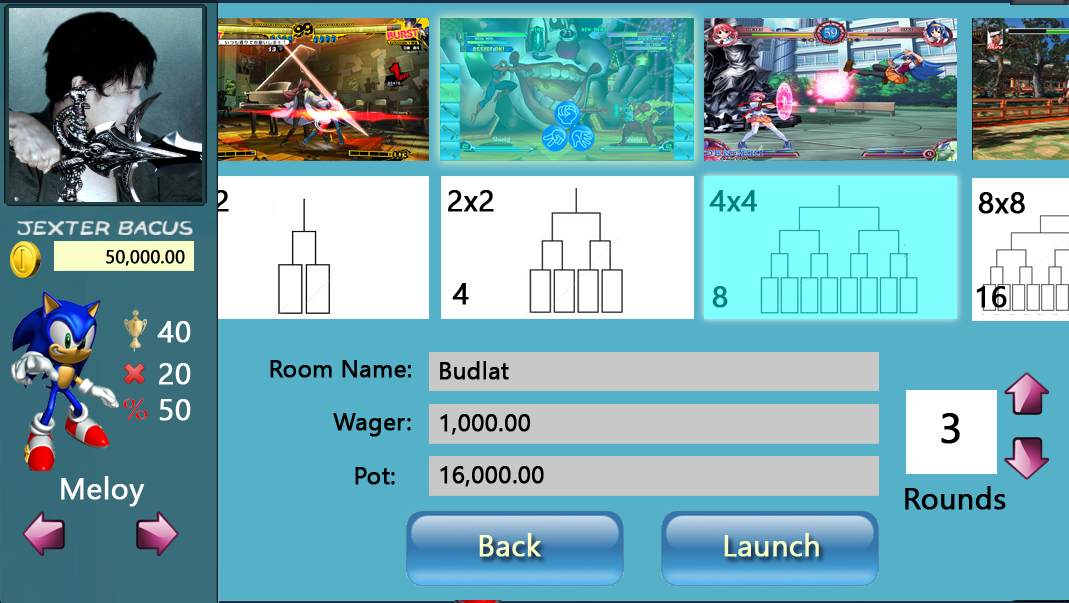
<style>
.page{position:relative;width:1069px;height:603px;background:#55b1c8}
.page>*{position:absolute;margin:0}
.t1{font:30px "NirmalaUI";color:#000000;font-weight:bold}
.t2{font:30px "NirmalaUI";color:#00807e;font-weight:bold}
.t3{font:18px "NirmalaUI";color:#000000;font-weight:bold}
.t4{font:30px "NirmalaUI";color:#ffffff;font-weight:bold}
.t5{font:24px "NirmalaUI";color:#000000;font-weight:bold}
.t6{font:42.2px "NirmalaUI";color:#000000;font-weight:bold}
.t7{font:30px "NirmalaUI";color:#f9ffc9;font-weight:bold}
</style>
<div class="page">
<p class="t1" style="left:448px;top:190px;width:46px;height:22px">2x2</p>
<p class="t2" style="left:709px;top:190px;width:48px;height:22px">4x4</p>
<p class="t1" style="left:978px;top:192px;width:47px;height:22px">8x8</p>
<p class="t3" style="left:106px;top:250px;width:79px;height:16px">50,000.00</p>
<p class="t1" style="left:452px;top:283px;width:17px;height:22px">4</p>
<p class="t2" style="left:712px;top:286px;width:16px;height:22px">8</p>
<p class="t1" style="left:976px;top:286px;width:31px;height:22px">16</p>
<p class="t4" style="left:157px;top:321px;width:34px;height:22px">40</p>
<p class="t4" style="left:159px;top:363px;width:32px;height:22px">20</p>
<p class="t5" style="left:270px;top:360px;width:141px;height:18px">Room Name:</p>
<p class="t5" style="left:440px;top:361px;width:69px;height:19px">Budlat</p>
<p class="t4" style="left:159px;top:399px;width:32px;height:22px">50</p>
<p class="t5" style="left:333px;top:413px;width:78px;height:24px">Wager:</p>
<p class="t5" style="left:440px;top:414px;width:91px;height:21px">1,000.00</p>
<p class="t6" style="left:941px;top:413px;width:19px;height:31px">3</p>
<p class="t5" style="left:355px;top:467px;width:40px;height:18px">Pot:</p>
<p class="t5" style="left:440px;top:466px;width:104px;height:21px">16,000.00</p>
<p class="t4" style="left:61px;top:476px;width:84px;height:31px">Meloy</p>
<p class="t1" style="left:905px;top:486px;width:101px;height:24px">Rounds</p>
<p class="t7" style="left:479px;top:533px;width:63px;height:24px">Back</p>
<p class="t7" style="left:724px;top:533px;width:95px;height:24px">Launch</p>
</div>
